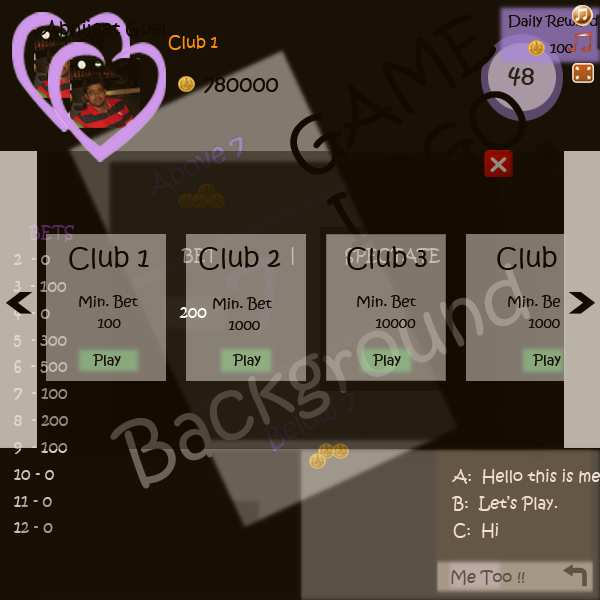
<style>
.page{position:relative;width:600px;height:600px}
.page>*{position:absolute;margin:0}
.t1{font:14px/26.8px "KristenITC-Regular";color:#000000}
.t2{font:18px "KristenITC-Regular";color:#000000}
.t3{font:16px "KristenITC-Regular";color:#ff9204}
.t4{font:22px "KristenITC-Regular";color:#000000}
.t5{font:26px "KristenITC-Regular";color:#191919}
.t6{font:16px "KristenITC-Regular"}
.t7{font:26px "KristenITC-Regular";color:#000000}
.t8{font:16px/26.8px "KristenITC-Regular"}
.t9{font:16px "KristenITC-Regular";color:#c5bcb1}
.t10{font:14px "KristenITC-Regular";color:#000000}
.t11{font:16px "KristenITC-Regular";color:#ffffff}
.t12{font:14px "KristenITC-Regular";color:#030303}
.t13{font:16px "KristenITC-Regular";color:#615342}
</style>
<div class="page">
<p class="t1" style="left:508px;top:15px;width:90px;height:38px">Daily Reward<br>          100</p>
<p class="t2" style="left:42px;top:19px;width:124px;height:18px">Abhijeet Goel</p>
<p class="t3" style="left:168px;top:35px;width:50px;height:15px">Club 1</p>
<p class="t4" style="left:202px;top:77px;width:77px;height:16px">780000</p>
<p class="t5" style="left:508px;top:67px;width:26px;height:19px">48</p>
<p class="t6" style="left:28px;top:225px;width:46px;height:17px">BETS</p>
<p class="t7" style="left:69px;top:246px;width:80px;height:24px">Club 1</p>
<p class="t7" style="left:199px;top:246px;width:82px;height:24px">Club 2</p>
<p class="t7" style="left:347px;top:246px;width:80px;height:24px">Club 3</p>
<p class="t7" style="left:497px;top:246px;width:60px;height:24px">Club</p>
<p class="t8" style="left:13px;top:254px;width:55px;height:279px">2  - 0<br>3  - 100<br>4  - 0<br>5  - 300<br>6  - 500<br>7  - 100<br>8  - 200<br>9  - 100<br>10 - 0<br>11 - 0<br>12 - 0</p>
<p class="t9" style="left:181px;top:247px;width:259px;height:18px">BET               |          SPECTATE</p>
<p class="t10" style="left:79px;top:295px;width:59px;height:13px">Min. Bet</p>
<p class="t10" style="left:213px;top:297px;width:59px;height:13px">Min. Bet</p>
<p class="t10" style="left:357px;top:295px;width:59px;height:13px">Min. Bet</p>
<p class="t10" style="left:508px;top:295px;width:53px;height:13px">Min. Be</p>
<p class="t11" style="left:179px;top:307px;width:28px;height:11px">200</p>
<p class="t10" style="left:97px;top:319px;width:24px;height:9px">100</p>
<p class="t10" style="left:228px;top:321px;width:32px;height:9px">1000</p>
<p class="t10" style="left:375px;top:319px;width:41px;height:9px">10000</p>
<p class="t10" style="left:528px;top:319px;width:32px;height:9px">1000</p>
<p class="t12" style="left:92px;top:354px;width:29px;height:12px">Play</p>
<p class="t12" style="left:232px;top:354px;width:29px;height:12px">Play</p>
<p class="t12" style="left:372px;top:354px;width:29px;height:12px">Play</p>
<p class="t12" style="left:532px;top:354px;width:29px;height:12px">Play</p>
<p class="t13" style="left:451px;top:570px;width:74px;height:15px">Me Too !!</p>
</div>
